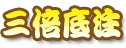
<style>
.page{position:relative;width:126px;height:48px;background:#ffffff}
.page>*{position:absolute;margin:0}
.t1{font:31.9px "TKanTingLiu-Ultra";scale:0.95 1}
</style>
<div class="page">
<p class="t1" style="left:3px;top:8px;width:118px;height:31px">三倍底注</p>
</div>
